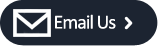
<style>
.page{position:relative;width:158px;height:46px;background:#1c2431}
.page>*{position:absolute;margin:0}
.t1{font:20px "Calibri";letter-spacing:-0.05em;color:#ffffff}
</style>
<div class="page">
<p class="t1" style="left:55px;top:14px;width:61px;height:15px">Email Us</p>
</div>
